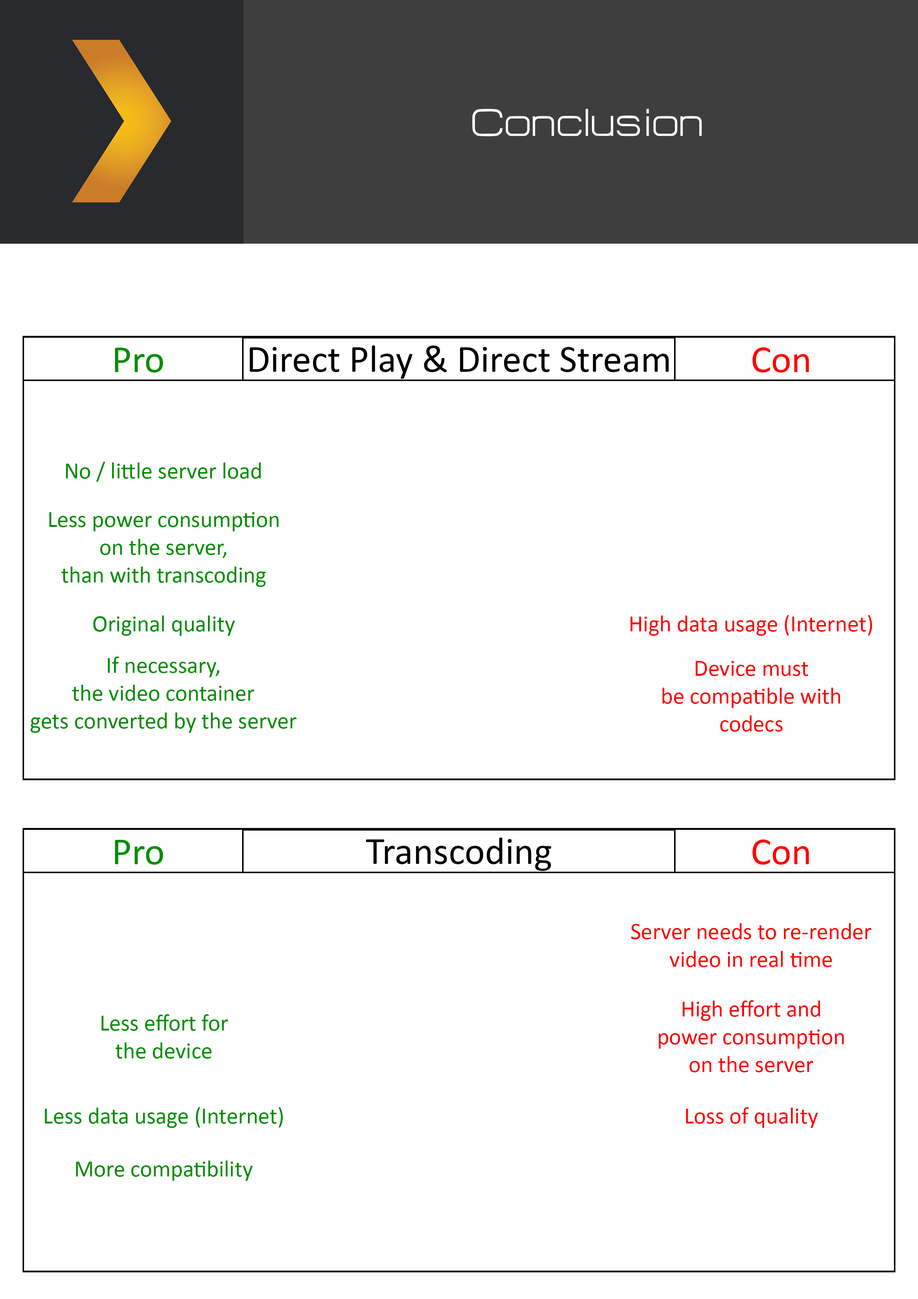
<style>
.page{position:relative;width:918px;height:1299px;background:#ffffff}
.page>*{position:absolute;margin:0}
.t1{font:47.8px "HURTMOLDPersonalUse-Regular";color:#ffffff}
.t2{font:38.6px "Calibri";color:#008d00}
.t3{font:38.6px "Calibri";color:#000000}
.t4{font:38.6px "Calibri";color:#ff0000}
.t5{font:23.1px "Calibri";color:#008d00}
.t6{font:23.1px "Calibri";color:#ff0000}
</style>
<div class="page">
<p class="t1" style="left:472px;top:109px;width:230px;height:27px">Conclusion</p>
<p class="t2" style="left:115px;top:348px;width:48px;height:24px">Pro</p>
<p class="t3" style="left:250px;top:345px;width:419px;height:34px">Direct Play &amp; Direct Stream</p>
<p class="t4" style="left:752px;top:347px;width:57px;height:25px">Con</p>
<p class="t5" style="left:66px;top:462px;width:195px;height:20px">No / little server load</p>
<p class="t5" style="left:49px;top:512px;width:230px;height:75px;text-align:center">Less power consumption<br>on the server,<br>than with transcoding</p>
<p class="t5" style="left:93px;top:615px;width:142px;height:21px">Original quality</p>
<p class="t6" style="left:630px;top:615px;width:242px;height:21px">High data usage (Internet)</p>
<p class="t5" style="left:30px;top:656px;width:267px;height:77px;text-align:center">If necessary,<br>the video container<br>gets converted by the server</p>
<p class="t6" style="left:662px;top:661px;width:178px;height:71px;text-align:center">Device must<br>be compatible with<br>codecs</p>
<p class="t2" style="left:115px;top:840px;width:48px;height:24px">Pro</p>
<p class="t3" style="left:366px;top:837px;width:185px;height:34px">Transcoding</p>
<p class="t4" style="left:752px;top:839px;width:57px;height:25px">Con</p>
<p class="t6" style="left:631px;top:923px;width:241px;height:44px;text-align:center">Server needs to re-render<br>video in real time</p>
<p class="t6" style="left:659px;top:1000px;width:185px;height:72px;text-align:center">High effort and<br>power consumption<br>on the server</p>
<p class="t5" style="left:101px;top:1014px;width:127px;height:44px;text-align:center">Less effort for<br>the device</p>
<p class="t5" style="left:45px;top:1107px;width:238px;height:21px">Less data usage (Internet)</p>
<p class="t6" style="left:686px;top:1107px;width:132px;height:21px">Loss of quality</p>
<p class="t5" style="left:76px;top:1160px;width:177px;height:21px">More compatibility</p>
</div>
